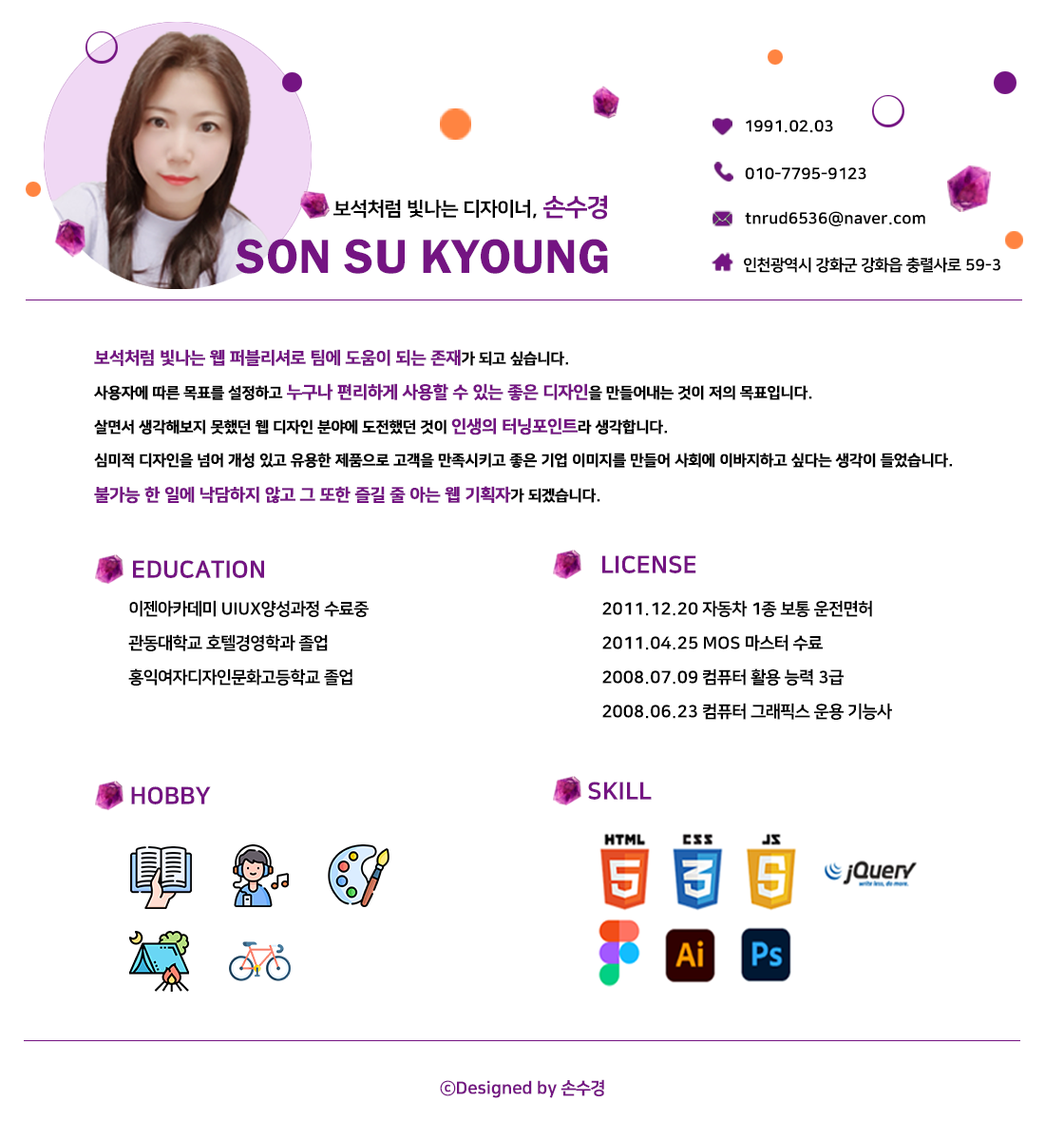
<style>
.page{position:relative;width:1045px;height:1141px;background:#ffffff}
.page>*{position:absolute;margin:0}
.t1{font:16px "NanumSquareOTF_acEB";color:#000000}
.t2{font:19.3px "NanumSquareOTF_acEB";color:#000000;scale:1.03 1}
.t3{font:24.8px "NanumSquareOTF_acEB";color:#741482;scale:1.03 1}
.t4{font:49.5px "FranklinGothic-Demi";color:#741482;scale:1.03 1}
.t5{font:15.2px/17.1px "NanumSquareOTF_acEB";color:#000000;font-weight:bold}
.t6{font:17.1px/17.1px "NanumSquareOTF_acEB";color:#741482;font-weight:bold}
.t7{font:23.8px "NanumSquareOTF_acEB";color:#741482}
.t8{font:17.1px/17.1px "NanumSquareOTF_acEB";color:#000000}
.t9{font:17.1px "NanumSquareOTF_acEB";color:#741482}
</style>
<div class="page">
<p class="t1" style="left:746px;top:120px;width:88px;height:13px">1991.02.03</p>
<p class="t1" style="left:745px;top:167px;width:122px;height:13px">010-7795-9123</p>
<p class="t2" style="left:334px;top:195px;width:273px;height:25px">보석처럼 빛나는 디자이너, <span class="t3">손수경</span></p>
<p class="t1" style="left:745px;top:211px;width:181px;height:15px">tnrud6536@naver.com</p>
<p class="t4" style="left:236px;top:239px;width:372px;height:35px">SON SU KYOUNG</p>
<p class="t1" style="left:744px;top:257px;width:257px;height:16px">인천광역시 강화군 강화읍 충렬사로 59-3</p>
<p class="t5" style="left:94px;top:349px;width:858px;height:155px"><span class="t6">보석처럼 빛나는 웹 퍼블리셔로 팀에 도움이 되는 존재</span>가 되고 싶습니다.<br><br>사용자에 따른 목표를 설정하고 <span class="t6">누구나 편리하게 사용할 수 있는 좋은 디자인</span>을 만들어내는 것이 저의 목표입니다.<br><br>살면서 생각해보지 못했던 웹 디자인 분야에 도전했던 것이 <span class="t6">인생의 터닝포인트</span>라 생각합니다.<br><br>심미적 디자인을 넘어 개성 있고 유용한 제품으로 고객을 만족시키고 좋은 기업 이미지를 만들어 사회에 이바지하고 싶다는 생각이 들었습니다.<br><br><span class="t6">불가능 한 일에 낙담하지 않고 그 또한 즐길 줄 아는 웹 기획자</span>가 되겠습니다.</p>
<p class="t7" style="left:603px;top:555px;width:94px;height:18px">LICENSE</p>
<p class="t7" style="left:133px;top:560px;width:131px;height:18px">EDUCATION</p>
<p class="t8" style="left:128px;top:600px;width:241px;height:86px">이젠아카데미 UIUX양성과정 수료중<br><br>관동대학교 호텔경영학과 졸업<br><br>홍익여자디자인문화고등학교 졸업</p>
<p class="t8" style="left:603px;top:600px;width:289px;height:119px">2011.12.20 자동차 1종 보통 운전면허<br><br>2011.04.25 MOS 마스터 수료<br><br>2008.07.09 컴퓨터 활용 능력 3급<br><br>2008.06.23 컴퓨터 그래픽스 운용 기능사</p>
<p class="t7" style="left:588px;top:781px;width:64px;height:18px">SKILL</p>
<p class="t7" style="left:131px;top:786px;width:80px;height:18px">HOBBY</p>
<p class="t9" style="left:440px;top:1079px;width:164px;height:19px">ⓒDesigned by 손수경</p>
</div>
